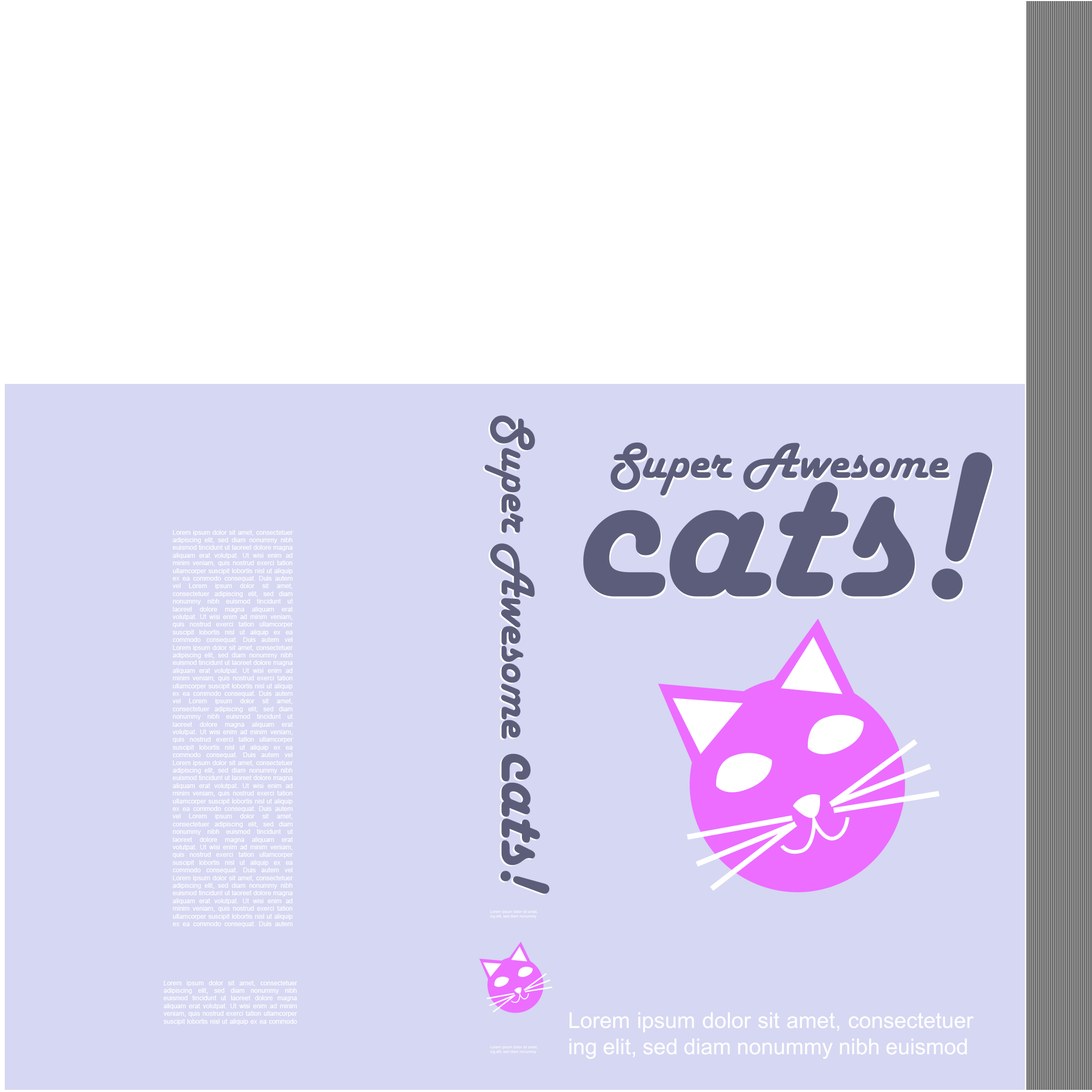
<style>
.page{position:relative;width:1092px;height:1092px;background:#d6d7f2}
.page>*{position:absolute;margin:0}
.t1{font:49.7px "HarlowSolid";color:#5b5d79}
.t2{font:76.4px "HarlowSolid";color:#5b5d79}
.t3{font:49.7px "HarlowSolid";color:#5c5d7a}
.t4{font:76.4px "HarlowSolid";color:#5c5d7a}
.t5{font:6.4px "ArialMT";color:#ffffff}
</style>
<div class="page">
<p class="t1" style="left:483px;top:416px;width:65px;height:479px">Super Awesome <span class="t2">cats!</span></p>
<p class="t3" style="left:484px;top:415px;width:66px;height:479px">Super Awesome <span class="t4">cats!</span></p>
<p class="t5" style="left:172px;top:530px;width:121px;height:397px;text-align:justify">Lorem ipsum dolor sit amet, consectetuer adipiscing elit, sed diam nonummy nibh euismod tincidunt ut laoreet dolore magna aliquam erat volutpat. Ut wisi enim ad minim veniam, quis nostrud exerci tation ullamcorper suscipit lobortis nisl ut aliquip ex ea commodo consequat. Duis autem vel Lorem ipsum dolor sit amet, consectetuer adipiscing elit, sed diam nonummy nibh euismod tincidunt ut laoreet dolore magna aliquam erat volutpat. Ut wisi enim ad minim veniam, quis nostrud exerci tation ullamcorper suscipit lobortis nisl ut aliquip ex ea commodo consequat. Duis autem vel Lorem ipsum dolor sit amet, consectetuer adipiscing elit, sed diam nonummy nibh euismod tincidunt ut laoreet dolore magna aliquam erat volutpat. Ut wisi enim ad minim veniam, quis nostrud exerci tation ullamcorper suscipit lobortis nisl ut aliquip ex ea commodo consequat. Duis autem vel Lorem ipsum dolor sit amet, consectetuer adipiscing elit, sed diam nonummy nibh euismod tincidunt ut laoreet dolore magna aliquam erat volutpat. Ut wisi enim ad minim veniam, quis nostrud exerci tation ullamcorper suscipit lobortis nisl ut aliquip ex ea commodo consequat. Duis autem vel Lorem ipsum dolor sit amet, consectetuer adipiscing elit, sed diam nonummy nibh euismod tincidunt ut laoreet dolore magna aliquam erat volutpat. Ut wisi enim ad minim veniam, quis nostrud exerci tation ullamcorper suscipit lobortis nisl ut aliquip ex ea commodo consequat. Duis autem vel Lorem ipsum dolor sit amet, consectetuer adipiscing elit, sed diam nonummy nibh euismod tincidunt ut laoreet dolore magna aliquam erat volutpat. Ut wisi enim ad minim veniam, quis nostrud exerci tation ullamcorper suscipit lobortis nisl ut aliquip ex ea commodo consequat. Duis autem vel Lorem ipsum dolor sit amet, consectetuer adipiscing elit, sed diam nonummy nibh euismod tincidunt ut laoreet dolore magna aliquam erat volutpat. Ut wisi enim ad minim veniam, quis nostrud exerci tation ullamcorper suscipit lobortis nisl ut aliquip ex ea commodo consequat. Duis autem vel Lorem ipsum dolor sit amet, consectetuer adipiscing elit, sed diam nonummy nibh euismod tincidunt ut laoreet dolore magna aliquam erat volutpat. Ut wisi enim ad minim veniam, quis nostrud exerci tation ullamcorper suscipit lobortis nisl ut aliquip ex ea commodo consequat. Duis autem vel Lorem ipsum dolor sit amet, consectetuer adipiscing elit, sed diam nonummy nibh euismod tincidunt ut laoreet dolore magna aliquam erat volutpat. Ut wisi enim ad minim veniam, quis nostrud exerci tation ullamcorper suscipit lobortis nisl ut aliquip ex ea commodo consequat. Duis autem vel</p>
<p class="t5" style="left:163px;top:981px;width:135px;height:44px;text-align:justify">Lorem ipsum dolor sit amet, consectetuer adipiscing elit, sed diam nonummy nibh euismod tincidunt ut laoreet dolore magna aliquam erat volutpat. Ut wisi enim ad minim veniam, quis nostrud exerci tation ullamcorper suscipit lobortis nisl ut aliquip ex ea commodo consequat. Duis autem vel</p>
</div>
